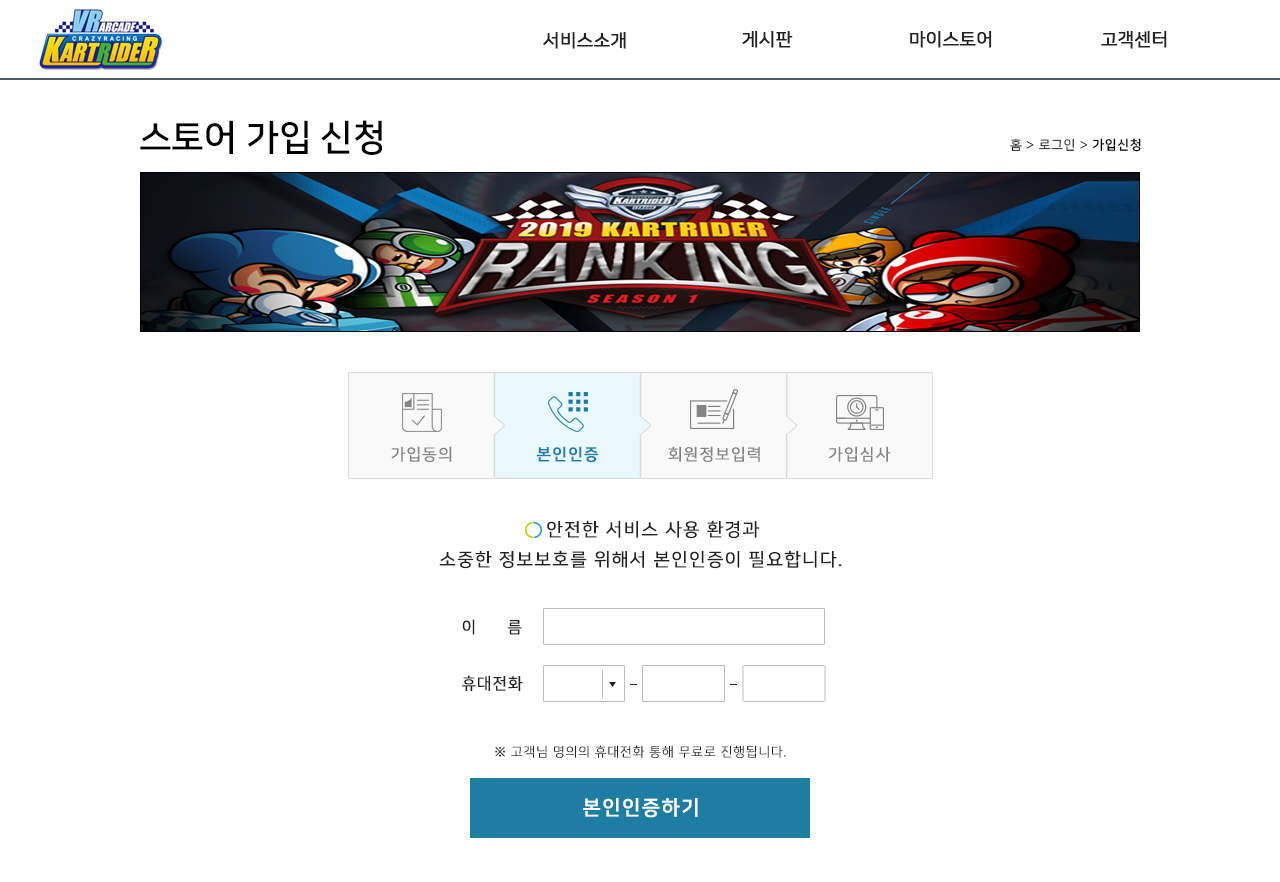
<style>
.page{position:relative;width:1280px;height:882px;background:#ffffff}
.page>*{position:absolute;margin:0}
.t1{font:18px "NanumSquareR";color:#222222;font-weight:bold}
.t2{font:36px "NanumSquareB";color:#000000}
.t3{font:13px "NanumSquareR";letter-spacing:0.05em;color:#000000}
.t4{font:13px "NanumSquareB";letter-spacing:0.05em;color:#000000}
.t5{font:16px "NanumSquareR";letter-spacing:0.05em;color:#838383;text-transform:uppercase;font-weight:bold}
.t6{font:16px "NanumSquareB";letter-spacing:0.05em;color:#1d7da3;text-transform:uppercase;font-weight:bold}
.t7{font:18px/30px "NanumSquareR";letter-spacing:0.05em;color:#222222;text-transform:uppercase;font-weight:bold}
.t8{font:16px "NanumSquareR";letter-spacing:2em;color:#222222;text-transform:uppercase;font-weight:bold}
.t9{font:16px "NanumSquareR";letter-spacing:0.04em;color:#222222;text-transform:uppercase;font-weight:bold}
.t10{font:16px "NanumSquareR";letter-spacing:0.05em;color:#222222;text-transform:uppercase;font-weight:bold}
.t11{font:13px "NanumSquareL";letter-spacing:0.05em;color:#222222;text-transform:uppercase;font-weight:bold}
.t12{font:20px "NanumSquareB";letter-spacing:0.05em;color:#ffffff;text-transform:uppercase;font-weight:bold}
</style>
<div class="page">
<p class="t1" style="left:742px;top:30px;width:51px;height:18px">게시판</p>
<p class="t1" style="left:910px;top:30px;width:82px;height:18px">마이스토어</p>
<p class="t1" style="left:1101px;top:30px;width:66px;height:18px">고객센터</p>
<p class="t1" style="left:543px;top:31px;width:83px;height:18px">서비스소개</p>
<p class="t2" style="left:140px;top:120px;width:242px;height:35px">스토어 가입 신청</p>
<p class="t3" style="left:1010px;top:138px;width:131px;height:14px">홈 &gt; 로그인 &gt; <span class="t4">가입신청</span></p>
<p class="t5" style="left:391px;top:446px;width:61px;height:16px">가입동의</p>
<p class="t6" style="left:536px;top:446px;width:63px;height:17px">본인인증</p>
<p class="t5" style="left:668px;top:446px;width:92px;height:16px">회원정보입력</p>
<p class="t5" style="left:829px;top:446px;width:62px;height:16px">가입심사</p>
<p class="t7" style="left:439px;top:520px;width:403px;height:49px;text-align:center">안전한 서비스 사용 환경과<br>소중한 정보보호를 위해서 본인인증이 필요합니다.</p>
<p class="t8" style="left:462px;top:619px;width:60px;height:16px">이<span class="t9">름</span></p>
<p class="t10" style="left:462px;top:675px;width:61px;height:16px">휴대전화</p>
<p class="t11" style="left:495px;top:745px;width:291px;height:13px">※ 고객님 명의의 휴대전화 통해 무료로 진행됩니다.</p>
<p class="t12" style="left:583px;top:798px;width:115px;height:20px">본인인증하기</p>
</div>
